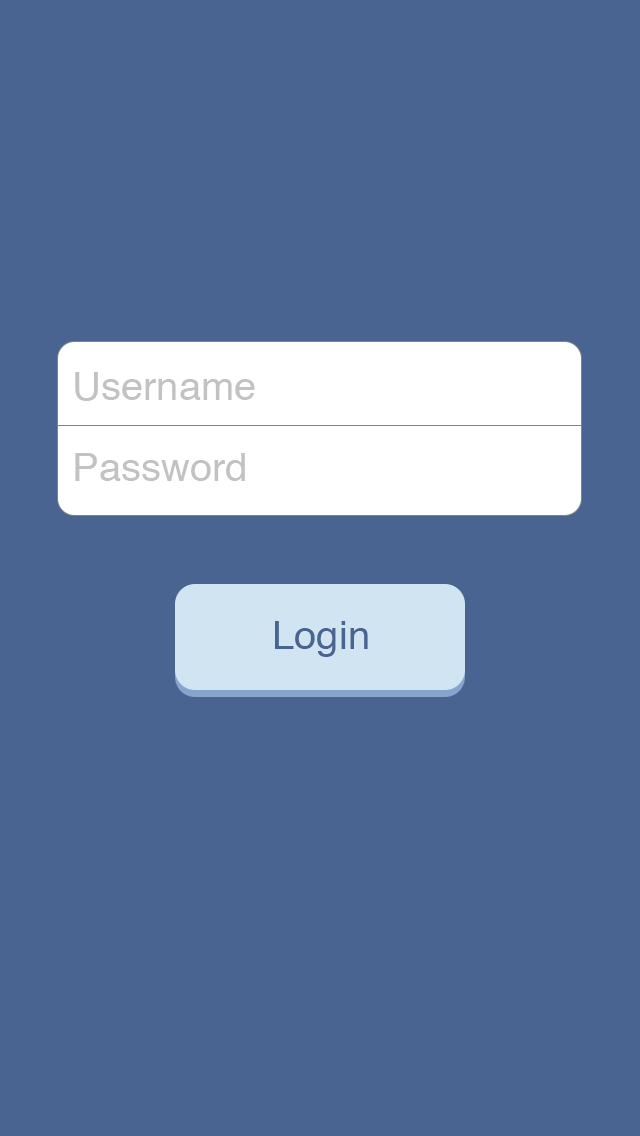
<style>
.page{position:relative;width:640px;height:1136px;background:#4a6491}
.page>*{position:absolute;margin:0}
.t1{font:38px "Helvetica";color:#c2c2c2;scale:1.05 1}
.t2{font:38px "Helvetica";color:#4a6491;scale:1.05 1}
</style>
<div class="page">
<p class="t1" style="left:75px;top:372px;width:180px;height:29px">Username</p>
<p class="t1" style="left:75px;top:453px;width:170px;height:28px">Password</p>
<p class="t2" style="left:275px;top:621px;width:93px;height:36px">Login</p>
</div>
